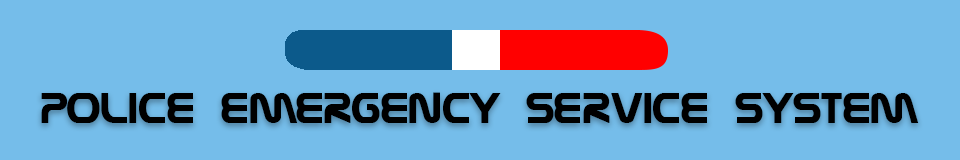
<style>
.page{position:relative;width:960px;height:160px;background:#75bdea}
.page>*{position:absolute;margin:0}
.t1{font:45.8px "Nasalization";color:#000000}
</style>
<div class="page">
<p class="t1" style="left:41px;top:92px;width:878px;height:31px">Police Emergency Service System</p>
</div>
